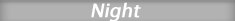
<style>
.page{position:relative;width:235px;height:21px;background:#b2b2b2}
.page>*{position:absolute;margin:0}
.t1{font:20px "MyriadPro-Regular";color:#ffffff;font-weight:bold;font-style:italic}
</style>
<div class="page">
<p class="t1" style="left:91px;top:2px;width:50px;height:20px">Night</p>
</div>
